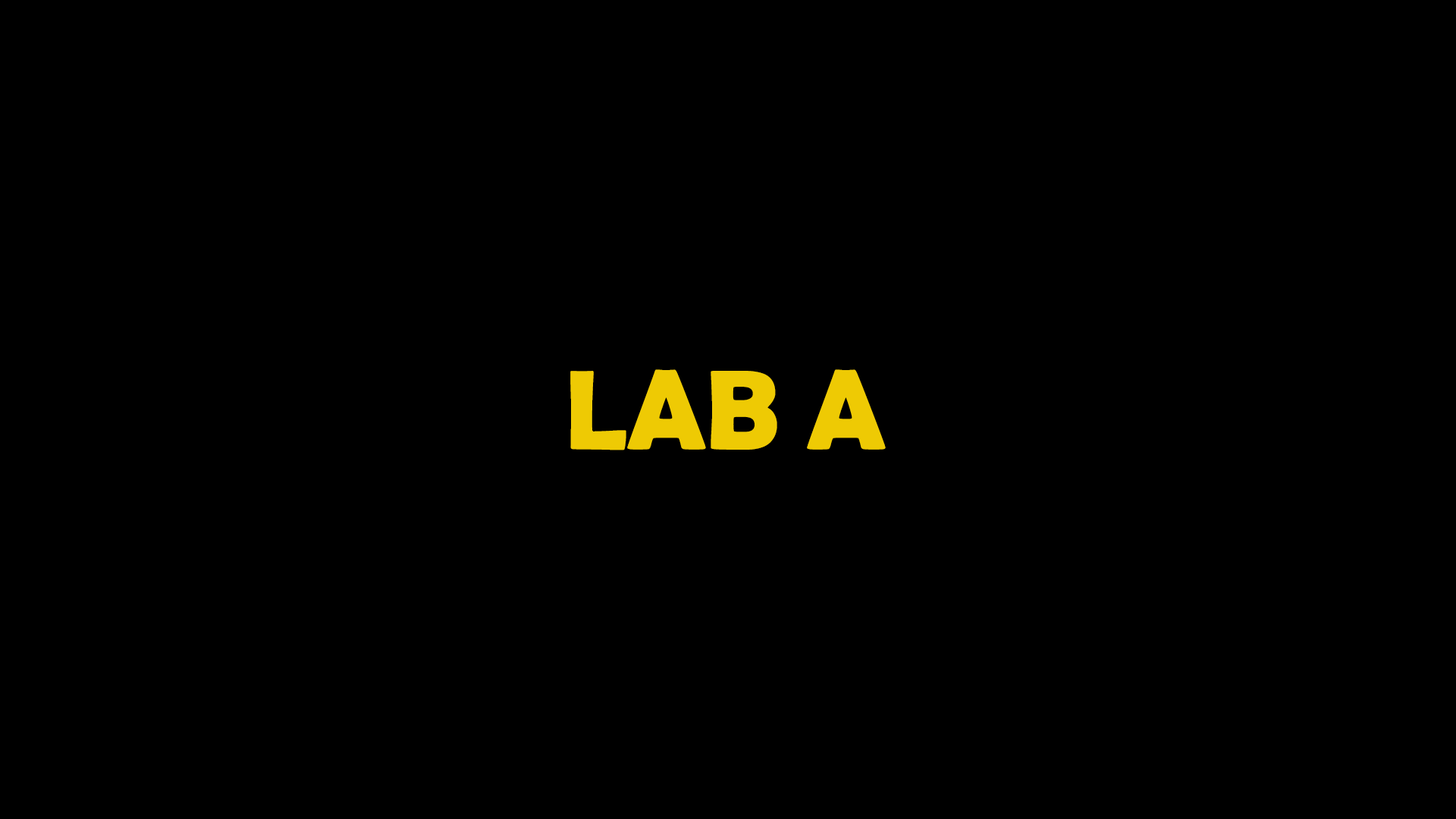
<style>
.page{position:relative;width:1456px;height:819px;background:#000000}
.page>*{position:absolute;margin:0}
.t1{font:113.7px "BerlinSansFBDemi-Bold";color:#eeca04}
</style>
<div class="page">
<p class="t1" style="left:570px;top:369px;width:316px;height:81px">LAB A</p>
</div>
